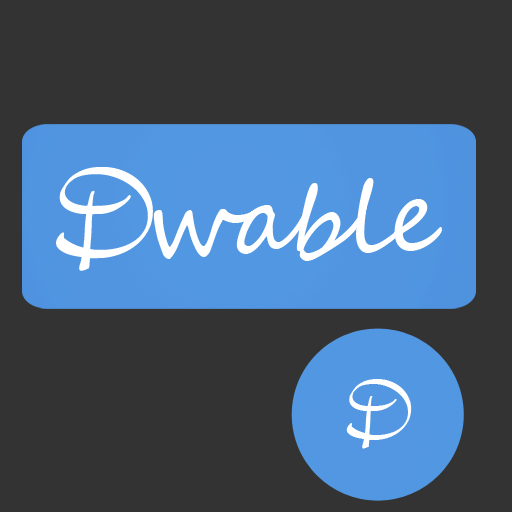
<style>
.page{position:relative;width:512px;height:512px;background:#333333}
.page>*{position:absolute;margin:0}
.t1{font:150px "Civilite";color:#ffffff}
.t2{font:100px "SegoeScript";color:#ffffff}
.t3{font:100px "Civilite";color:#ffffff}
</style>
<div class="page">
<p class="t1" style="left:56px;top:167px;width:97px;height:104px">D</p>
<p class="t2" style="left:153px;top:178px;width:289px;height:83px">wable</p>
<p class="t3" style="left:346px;top:379px;width:66px;height:70px">D</p>
</div>
